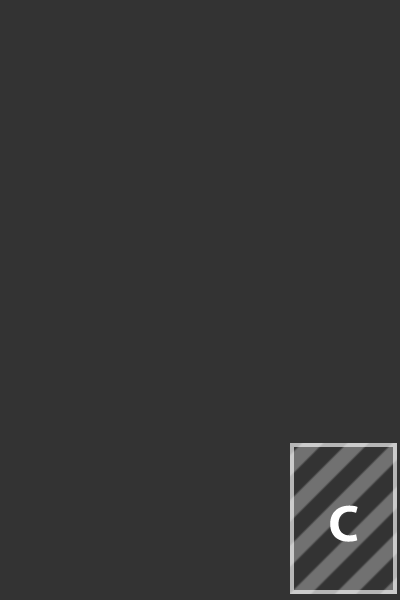
<style>
.page{position:relative;width:400px;height:600px;background:#333333}
.page>*{position:absolute;margin:0}
.t1{font:45px "AdobeGothicStd-Bold";letter-spacing:-0.05em;color:#ffffff;font-weight:bold;scale:1.11 1}
</style>
<div class="page">
<p class="t1" style="left:330px;top:505px;width:28px;height:37px">C</p>
</div>
